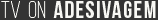
<style>
.page{position:relative;width:158px;height:20px;background:#333333}
.page>*{position:absolute;margin:0}
.t1{font:24px "BebasNeueBold";letter-spacing:0.05em;color:#f8f8f4}
.t2{font:24px "BebasNeueLight";color:#f8f8f4}
</style>
<div class="page">
<p class="t1" style="left:1px;top:1px;width:155px;height:17px"><span class="t2">TV  ON  </span>ADESIVAGEM</p>
</div>
